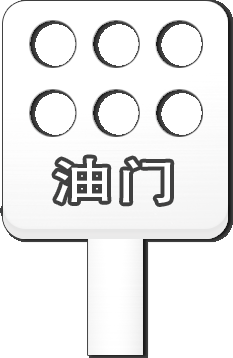
<style>
.page{position:relative;width:233px;height:358px;background:#ffffff}
.page>*{position:absolute;margin:0}
.t1{font:48.5px "AdobeHeitiStd-Regular";letter-spacing:0.012em;color:#ffffff;scale:1.3 1}
.t2{font:48.5px "Impact";letter-spacing:0.012em;color:#ffffff;scale:1.3 1}
</style>
<div class="page">
<p class="t1" style="left:55px;top:158px;width:116px;height:45px"><span class="t2"> </span>油门</p>
</div>
